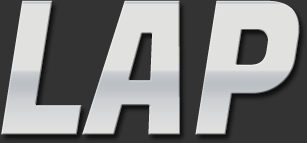
<style>
.page{position:relative;width:307px;height:143px;background:#333333}
.page>*{position:absolute;margin:0}
.t1{font:185.2px "FugazOne-Regular";color:#dfdfdf;scale:0.89 1}
</style>
<div class="page">
<p class="t1" style="left:1px;top:0px;width:299px;height:135px">LAP</p>
</div>
